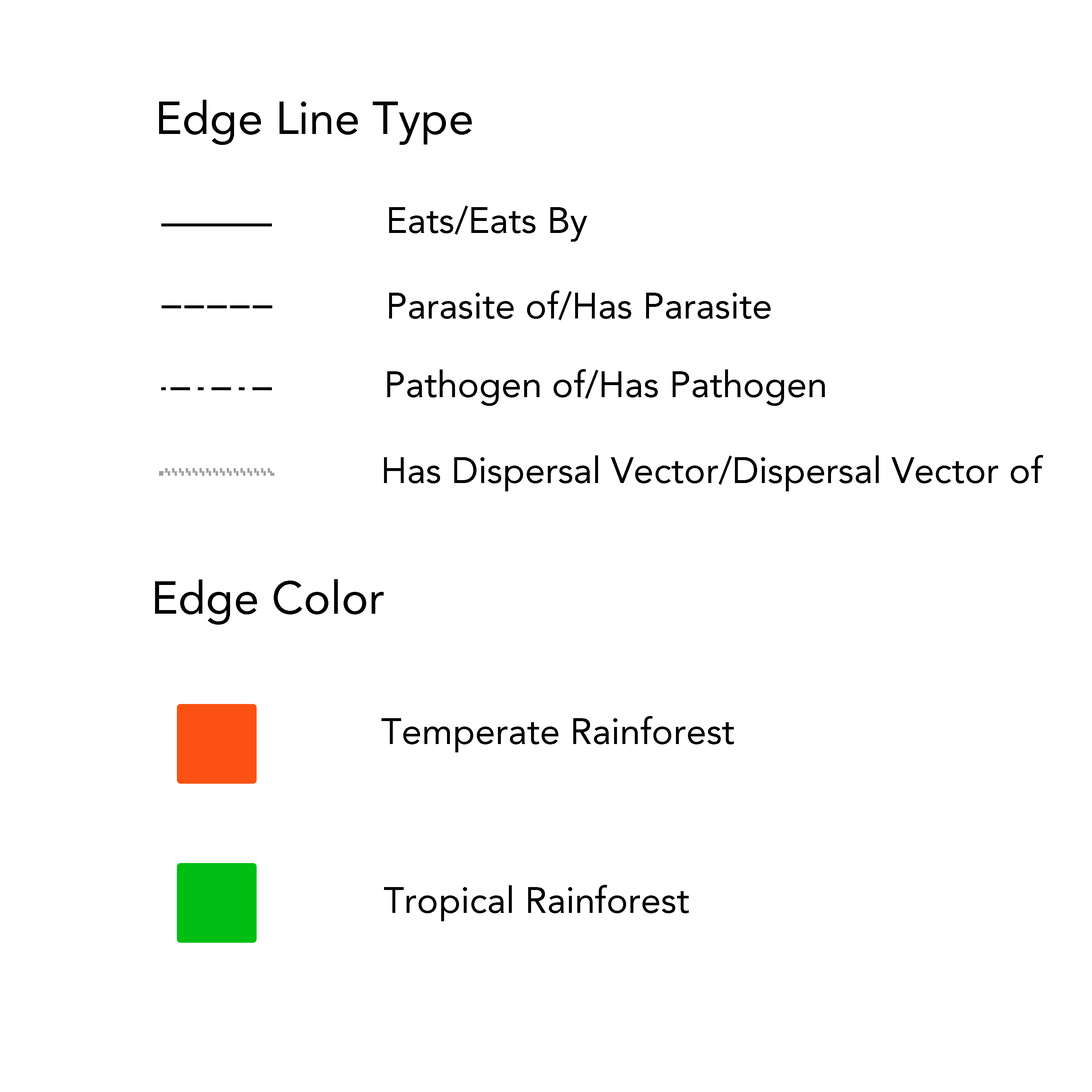
<style>
.page{position:relative;width:1092px;height:1092px;background:#ffffff}
.page>*{position:absolute;margin:0}
.t1{font:45.5px "Avenir-Roman";color:#000000}
.t2{font:36.4px "Avenir-Roman";color:#000000}
</style>
<div class="page">
<p class="t1" style="left:159px;top:100px;width:313px;height:45px">Edge Line Type</p>
<p class="t2" style="left:389px;top:206px;width:198px;height:36px">Eats/Eats By</p>
<p class="t2" style="left:389px;top:290px;width:382px;height:30px">Parasite of/Has Parasite</p>
<p class="t2" style="left:387px;top:369px;width:438px;height:37px">Pathogen of/Has Pathogen</p>
<p class="t2" style="left:384px;top:455px;width:659px;height:36px">Has Dispersal Vector/Dispersal Vector of</p>
<p class="t1" style="left:155px;top:579px;width:229px;height:46px">Edge Color</p>
<p class="t2" style="left:381px;top:716px;width:353px;height:36px">Temperate Rainforest</p>
<p class="t2" style="left:384px;top:885px;width:305px;height:36px">Tropical Rainforest</p>
</div>
